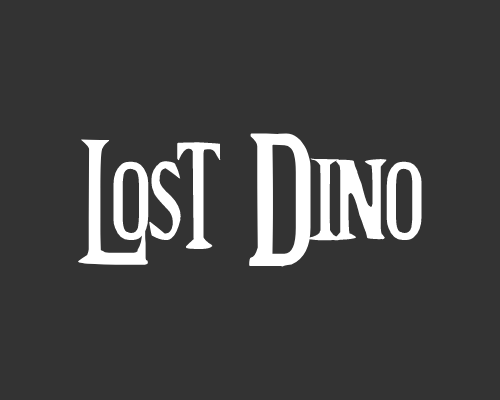
<style>
.page{position:relative;width:500px;height:400px;background:#333333}
.page>*{position:absolute;margin:0}
.t1{font:144px "FutureTimeSplitters";color:#ffffff}
</style>
<div class="page">
<p class="t1" style="left:78px;top:133px;width:344px;height:134px">Lost Dino</p>
</div>
